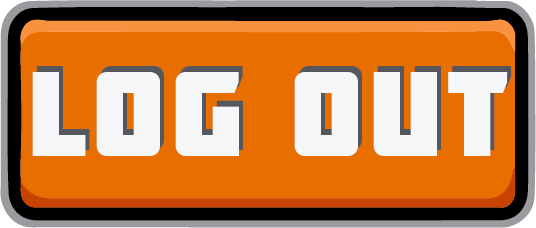
<style>
.page{position:relative;width:536px;height:228px;background:#e86e00}
.page>*{position:absolute;margin:0}
.t1{font:120px "Molot";letter-spacing:0.05em;color:#f6f7f8}
</style>
<div class="page">
<p class="t1" style="left:32px;top:72px;width:476px;height:84px">log out</p>
<p class="t1" style="left:36px;top:66px;width:476px;height:84px">log out</p>
</div>
